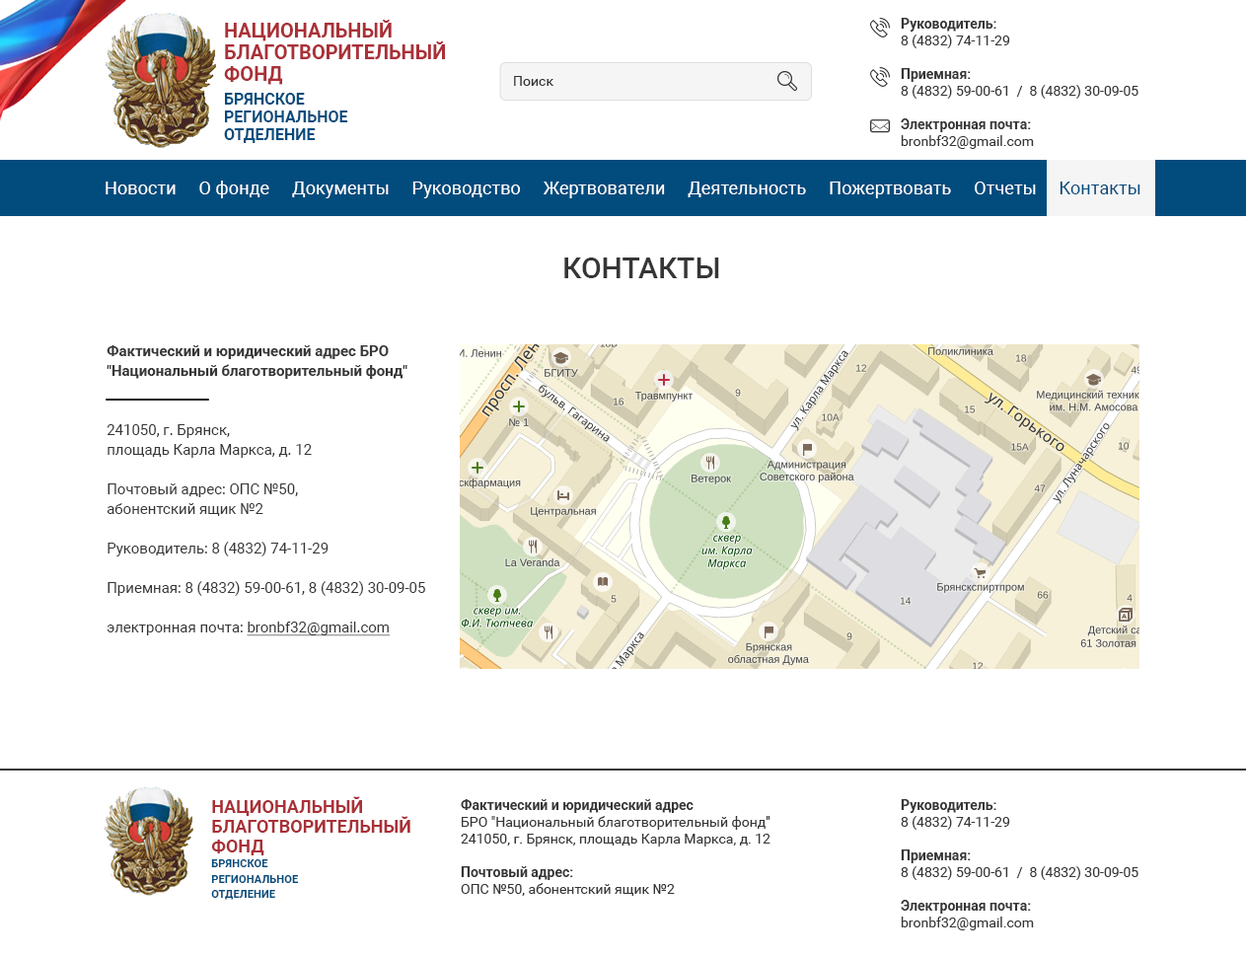
<style>
.page{position:relative;width:1246px;height:957px;background:#ffffff}
.page>*{position:absolute;margin:0}
.t1{font:13.8px/16.8px "Roboto-Regular";color:#363636}
.t2{font:13.8px/16.8px "Roboto-Bold";color:#363636}
.t3{font:19.7px/21.7px "Roboto-Bold";color:#aa3037;text-transform:uppercase}
.t4{font:13.8px "Roboto-Regular";color:#333333}
.t5{font:15.8px/17.8px "Roboto-Bold";color:#024c7d;text-transform:uppercase}
.t6{font:17.8px "Roboto-Regular";letter-spacing:0.005em;color:#ffffff}
.t7{font:17.8px "Roboto-Regular";letter-spacing:0.005em;color:#024c7d}
.t8{font:29.6px "Roboto-Medium";color:#363636;text-transform:uppercase}
.t9{font:14.8px/19.7px "Roboto-Regular";color:#363636}
.t10{font:14.8px/19.7px "Roboto-Bold";color:#363636}
.t11{font:14.8px/19.7px "Roboto-Regular";color:#363636;text-decoration:underline}
.t12{font:17.8px/19.8px "Roboto-Bold";color:#aa3037;text-transform:uppercase}
.t13{font:11.1px/15.1px "Roboto-Bold";color:#024c7d;text-transform:uppercase}
</style>
<div class="page">
<p class="t1" style="left:901px;top:18px;width:238px;height:131px"><span class="t2">Руководитель: <br></span>8 (4832) 74-11-29<br><span class="t2"><br>Приемная: <br></span>8 (4832) 59-00-61  /  8 (4832) 30-09-05<br><span class="t2"><br>Электронная почта:<br></span>bronbf32@gmail.com</p>
<p class="t3" style="left:224px;top:20px;width:221px;height:65px">национальный<br>благотворительный<br>фонд</p>
<p class="t4" style="left:514px;top:76px;width:40px;height:10px">Поиск</p>
<p class="t5" style="left:224px;top:93px;width:124px;height:50px">брянское<br>региональное<br>отделение</p>
<p class="t6" style="left:106px;top:181px;width:1034px;height:17px">Новости     О фонде     Документы     Руководство     Жертвователи     Деятельность     Пожертвовать     Отчеты  <span class="t7">   Контакты</span></p>
<p class="t8" style="left:564px;top:257px;width:155px;height:21px">контакты</p>
<p class="t9" style="left:107px;top:345px;width:318px;height:291px"><span class="t10">Фактический и юридический адрес БРО "Национальный благотворительный фонд"<br><br></span><br>241050, г. Брянск, <br>площадь Карла Маркса, д. 12<br><br>Почтовый адрес: ОПС №50, <br>абонентский ящик №2<br><br>Руководитель: 8 (4832) 74-11-29<br><br>Приемная: 8 (4832) 59-00-61, 8 (4832) 30-09-05<br><br>электронная почта: <span class="t11">bronbf32@gmail.com</span></p>
<p class="t12" style="left:211px;top:796px;width:199px;height:104px">национальный<br>благотворительный<br>фонд<br><span class="t13">брянское<br>региональное<br>отделение</span></p>
<p class="t1" style="left:461px;top:799px;width:310px;height:97px"><span class="t2">Фактический и юридический адрес <br></span>БРО "Национальный благотворительный фонд"<br>241050, г. Брянск, площадь Карла Маркса, д. 12<br><br><span class="t2">Почтовый адрес: <br></span>ОПС №50, абонентский ящик №2</p>
<p class="t1" style="left:901px;top:799px;width:238px;height:131px"><span class="t2">Руководитель: <br></span>8 (4832) 74-11-29<br><span class="t2"><br>Приемная: <br></span>8 (4832) 59-00-61  /  8 (4832) 30-09-05<br><span class="t2"><br>Электронная почта:<br></span>bronbf32@gmail.com</p>
</div>
